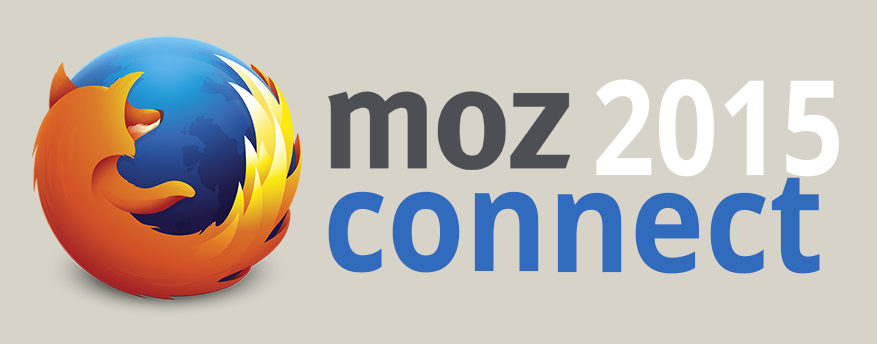
<style>
.page{position:relative;width:877px;height:344px;background:#d7d3c8}
.page>*{position:absolute;margin:0}
.t1{font:132.4px "OpenSans-Bold";color:#ffffff;scale:0.83 1}
.t2{font:142.6px "OpenSans-Bold";color:#316bbd;scale:0.88 1}
</style>
<div class="page">
<p class="t1" style="left:596px;top:79px;width:243px;height:98px">2015</p>
<p class="t2" style="left:328px;top:177px;width:492px;height:97px">connect</p>
</div>
